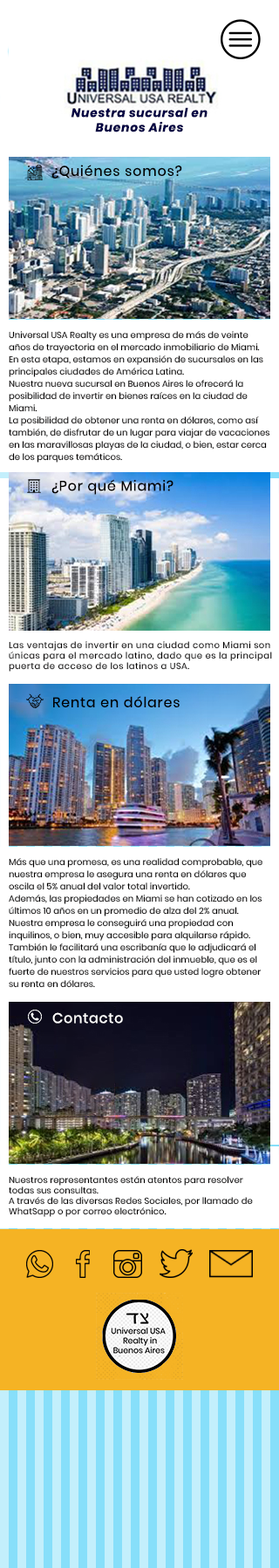
<style>
.page{position:relative;width:279px;height:1568px;background:#ffffff}
.page>*{position:absolute;margin:0}
.t1{font:12.2px "Poppins-BoldItalic";letter-spacing:0.05em;color:#000043}
.t2{font:13.9px "Poppins-Regular";letter-spacing:0.05em;color:#020000}
.t3{font:8.7px/12.2px "Poppins-Regular";letter-spacing:0.005em;color:#020000}
.t4{font:8.7px "Poppins-Regular";letter-spacing:0.05em;color:#020000}
.t5{font:13.9px "Poppins-Regular";letter-spacing:0.05em;color:#ffffff}
.t6{font:8.7px "Poppins-Regular";letter-spacing:0.01em;color:#020000}
</style>
<div class="page">
<p class="t1" style="left:71px;top:107px;width:136px;height:25px;text-align:center">Nuestra sucursal en<br>Buenos Aires</p>
<p class="t2" style="left:51px;top:165px;width:131px;height:14px">¿Quiénes somos?</p>
<p class="t3" style="left:9px;top:331px;width:261px;height:132px">Universal USA Realty es una empresa de más de veinte años de trayectoria en el mercado inmobiliario de Miami.<br>En esta etapa, estamos en expansión de sucursales en las principales ciudades de América Latina.<br>Nuestra nueva sucursal en Buenos Aires le ofrecerá la posibilidad de invertir en bienes raíces en la ciudad de Miami.<br>La posibilidad de obtener una renta en dólares, como así también, de disfrutar de un lugar para viajar de vacaciones en las maravillosas playas de la ciudad, o bien, estar cerca de los parques temáticos.</p>
<p class="t2" style="left:51px;top:479px;width:122px;height:16px">¿Por qué Miami?</p>
<p class="t4" style="left:9px;top:641px;width:263px;height:31px">Las ventajas de invertir en una ciudad como Miami son únicas para el mercado latino, dado que es la principal puerta de acceso de los latinos a USA.</p>
<p class="t2" style="left:53px;top:696px;width:126px;height:11px">Renta en dólares</p>
<p class="t3" style="left:9px;top:858px;width:253px;height:130px">Más que una promesa, es una realidad comprobable, que nuestra empresa le asegura una renta en dólares que oscila el 5% anual del valor total invertido.<br>Además, las propiedades en Miami se han cotizado en los últimos 10 años en un promedio de alza del 2% anual.<br>Nuestra empresa le conseguirá una propiedad con inquilinos, o bien, muy accesible para alquilarse rápido.<br>También le facilitará una escribanía que le adjudicará el título, junto con la administración del inmueble, que es el fuerte de nuestros servicios para que usted logre obtener su renta en dólares.</p>
<p class="t5" style="left:52px;top:1012px;width:71px;height:12px">Contacto</p>
<p class="t6" style="left:9px;top:1176px;width:244px;height:41px">Nuestros representantes están atentos para resolver todas sus consultas.<br>A través de las diversas Redes Sociales, por llamado de WhatSapp o por correo electrónico.</p>
</div>
